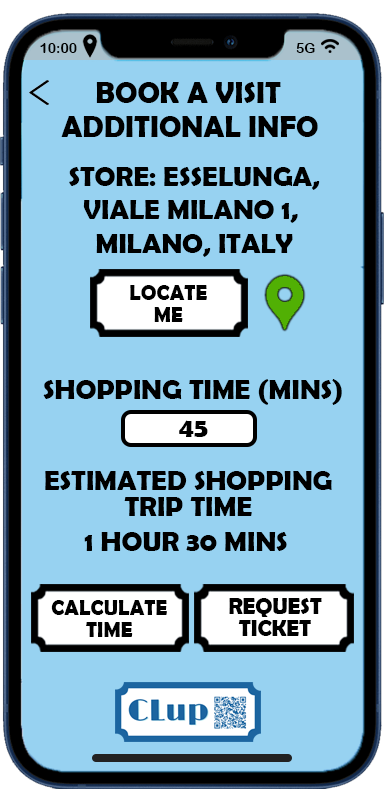
<style>
.page{position:relative;width:384px;height:789px;background:#97d2f1}
.page>*{position:absolute;margin:0}
.t1{font:14px "ArialRoundedMTBold";color:#000000}
.t2{font:30px "BerlinSansFBDemi-Bold";color:#000000}
.t3{font:28px "BerlinSansFBDemi-Bold";color:#000000}
.t4{font:22.3px/22px "BerlinSansFBDemi-Bold";color:#000000;scale:0.95 1}
.t5{font:28px/26px "BerlinSansFBDemi-Bold";color:#000000}
.t6{font:23.5px/22px "BerlinSansFBDemi-Bold";color:#000000;scale:0.96 1}
</style>
<div class="page">
<p class="t1" style="left:40px;top:43px;width:37px;height:10px">10:00</p>
<p class="t1" style="left:296px;top:43px;width:19px;height:10px">5G</p>
<p class="t2" style="left:96px;top:82px;width:185px;height:21px">BOOK A VISIT</p>
<p class="t2" style="left:61px;top:116px;width:257px;height:21px">ADDITIONAL INFO</p>
<p class="t3" style="left:69px;top:167px;width:251px;height:90px;text-align:center">STORE: ESSELUNGA,<br>VIALE MILANO 1, <br>MILANO, ITALY</p>
<p class="t4" style="left:130px;top:285px;width:77px;height:37px;text-align:center">LOCATE<br>ME</p>
<p class="t3" style="left:43px;top:379px;width:299px;height:26px">SHOPPING TIME (MINS)</p>
<p class="t3" style="left:179px;top:420px;width:29px;height:17px">45</p>
<p class="t5" style="left:45px;top:471px;width:287px;height:45px;text-align:center">ESTIMATED SHOPPING<br>TRIP TIME</p>
<p class="t3" style="left:84px;top:532px;width:203px;height:19px">1 HOUR 30 MINS</p>
<p class="t4" style="left:51px;top:600px;width:116px;height:37px;text-align:center">CALCULATE<br>TIME</p>
<p class="t6" style="left:229px;top:598px;width:93px;height:38px;text-align:center">REQUEST<br>TICKET</p>
</div>
